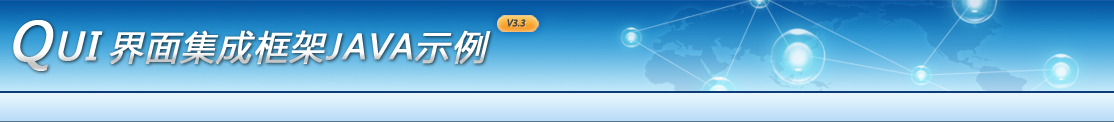
<style>
.page{position:relative;width:1114px;height:122px}
.page>*{position:absolute;margin:0}
.t1{font:38px "MicrosoftYaHei";letter-spacing:0.05em;color:#ffffff;font-weight:bold;font-style:italic}
.t2{font:52px "MicrosoftYaHei";letter-spacing:0.05em;color:#ffffff;font-weight:bold;font-style:italic}
.t3{font:34px "MicrosoftYaHei";letter-spacing:0.05em;color:#ffffff;font-weight:bold;font-style:italic}
.t4{font:10px "MyriadPro-Regular";color:#404040;text-transform:uppercase;font-weight:bold;font-style:italic}
</style>
<div class="page">
<p class="t1" style="left:13px;top:20px;width:90px;height:51px"><span class="t2">Q</span>UI</p>
<p class="t3" style="left:109px;top:30px;width:382px;height:35px">界面集成框架JAVA示例</p>
<p class="t4" style="left:507px;top:19px;width:19px;height:8px">v3.3</p>
</div>
